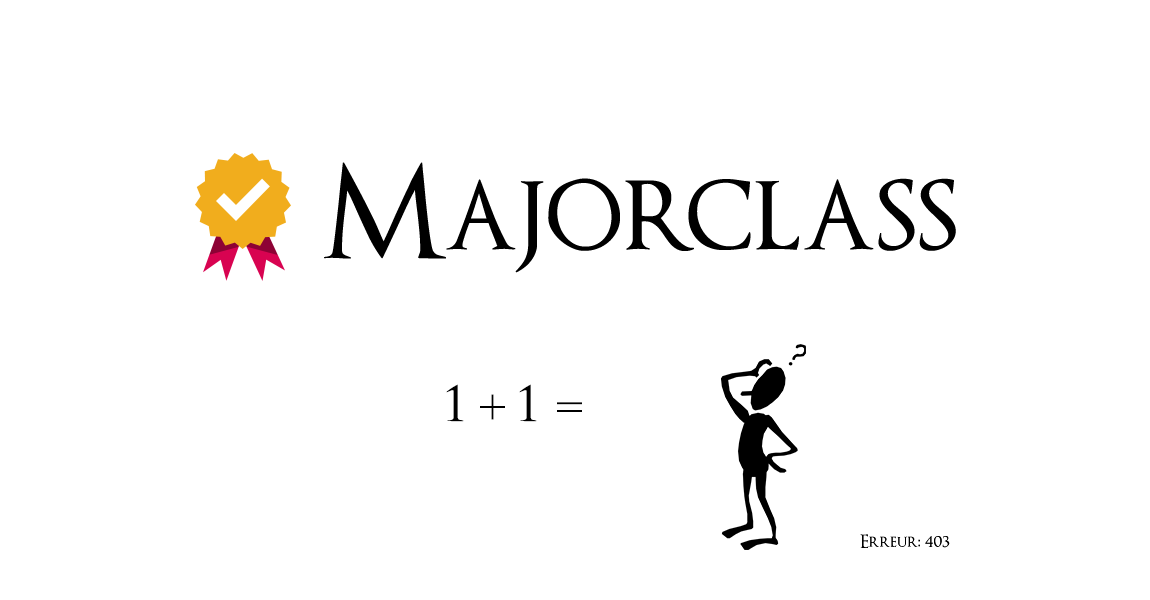
<style>
.page{position:relative;width:1150px;height:600px;background:#ffffff}
.page>*{position:absolute;margin:0}
.t1{font:60px "OptimusPrinceps";color:#000000}
.t2{font:48px "TimesNewRomanPSMT";color:#000000}
.t3{font:18px "OptimusPrinceps";color:#000000}
</style>
<div class="page">
<p class="t1" style="left:446px;top:384px;width:18px;height:38px">1</p>
<p class="t1" style="left:519px;top:384px;width:18px;height:38px">1</p>
<p class="t2" style="left:480px;top:394px;width:25px;height:26px">+</p>
<p class="t2" style="left:557px;top:402px;width:25px;height:10px">=</p>
<p class="t3" style="left:860px;top:534px;width:90px;height:14px">Erreur: 403</p>
<p class="t3" style="left:860px;top:534px;width:90px;height:14px">Erreur: 403</p>
</div>
